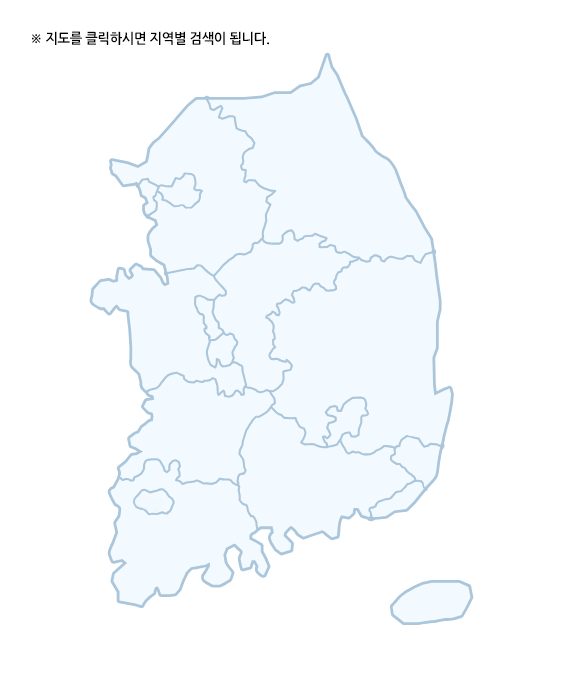
<style>
.page{position:relative;width:580px;height:678px;background:#ffffff}
.page>*{position:absolute;margin:0}
.t1{font:14px "NanumGothicBold";letter-spacing:-0.025em;color:#000000;scale:0.95 1}
</style>
<div class="page">
<p class="t1" style="left:32px;top:31px;width:237px;height:14px">※ 지도를 클릭하시면 지역별 검색이 됩니다.</p>
</div>
